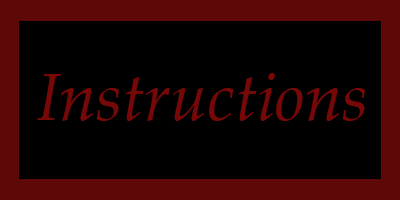
<style>
.page{position:relative;width:400px;height:200px;background:#000000}
.page>*{position:absolute;margin:0}
.t1{font:66.7px "PalatinoLinotype-Italic";color:#760808}
</style>
<div class="page">
<p class="t1" style="left:37px;top:73px;width:328px;height:48px">Instructions</p>
</div>
